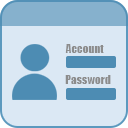
<style>
.page{position:relative;width:128px;height:128px;background:#dbe8f4}
.page>*{position:absolute;margin:0}
.t1{font:11.4px "Impact";color:#838383}
</style>
<div class="page">
<p class="t1" style="left:65px;top:44px;width:39px;height:9px">Account</p>
<p class="t1" style="left:65px;top:75px;width:46px;height:9px">Password</p>
</div>
